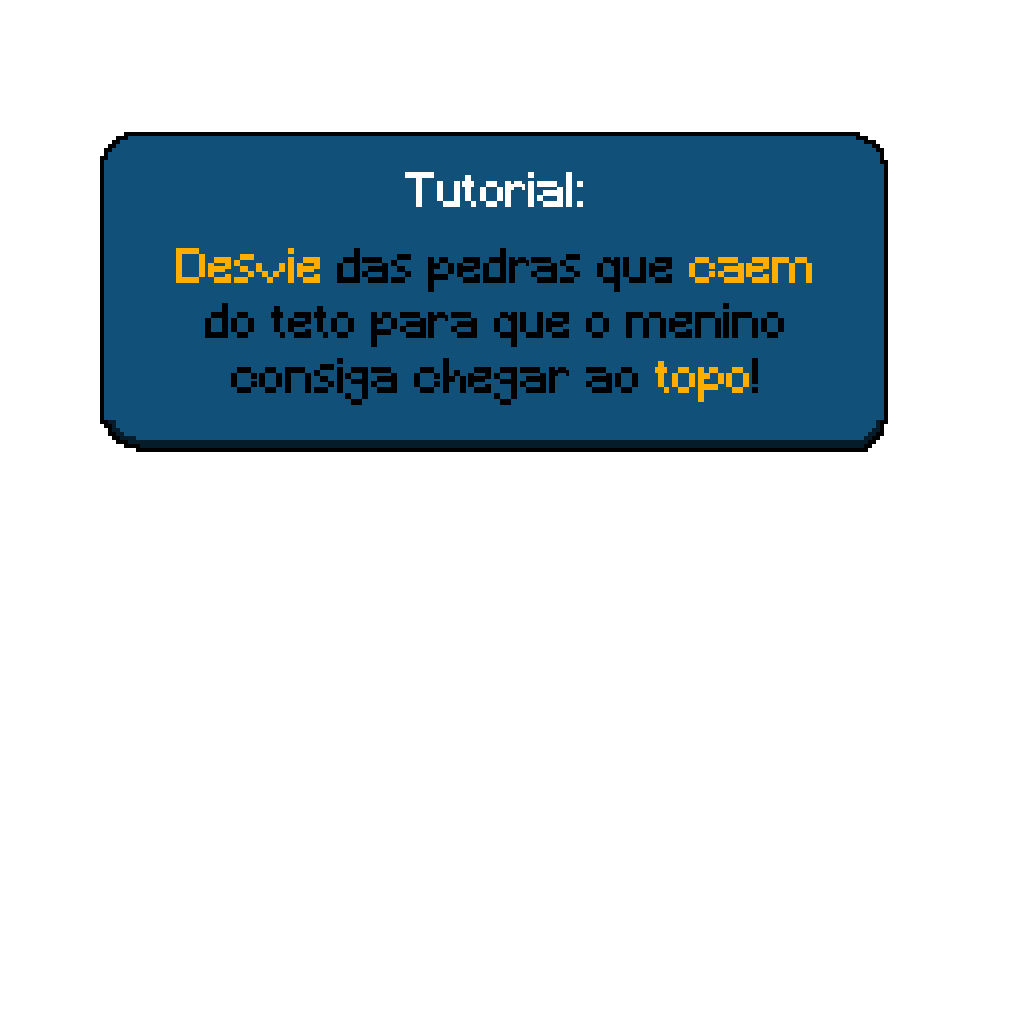
<style>
.page{position:relative;width:1024px;height:1024px;background:#ffffff}
.page>*{position:absolute;margin:0}
.t1{font:45.8px "Minecraft";color:#ffffff}
.t2{font:45.8px "Minecraft";color:#000000}
.t3{font:45.8px "Minecraft";color:#ffae00}
</style>
<div class="page">
<p class="t1" style="left:405px;top:172px;width:178px;height:35px">Tutorial:</p>
<p class="t2" style="left:176px;top:248px;width:636px;height:157px;text-align:center"><span class="t3">Desvie </span>das pedras que <span class="t3">caem </span>do teto para que o menino consiga chegar ao <span class="t3">topo</span>!</p>
</div>
